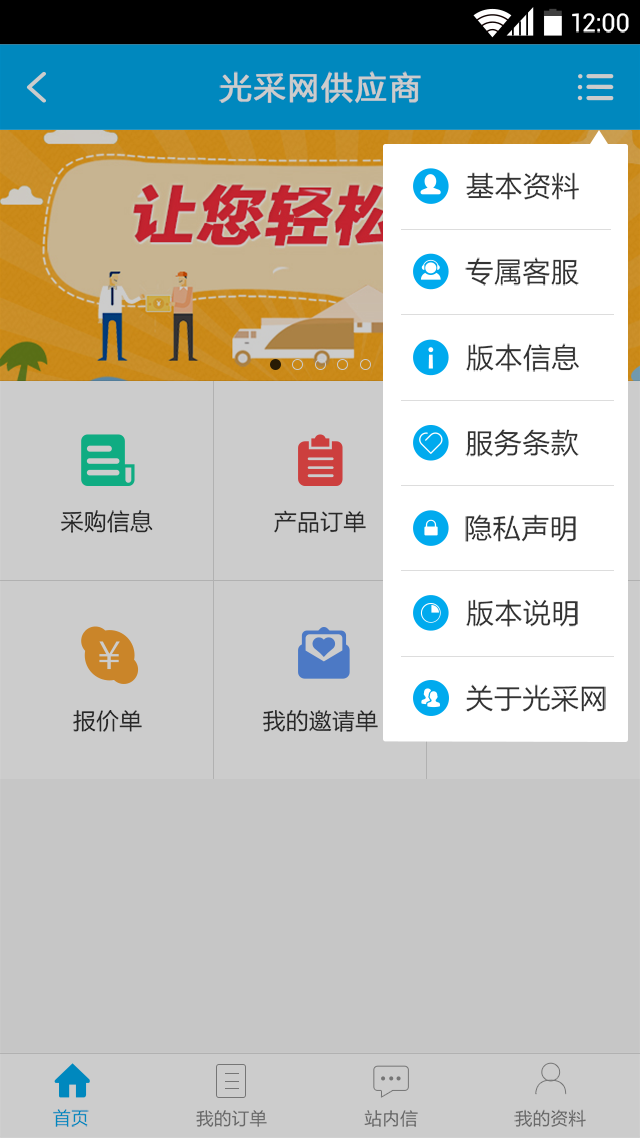
<style>
.page{position:relative;width:640px;height:1138px;background:#cccccc}
.page>*{position:absolute;margin:0}
.t1{font:24.9px "Roboto-Regular";color:#ffffff}
.t2{font:32px "FZLTHJW--GB1-0";letter-spacing:0.03em;color:#cccccc;font-weight:bold}
.t3{font:28.4px "FZLTHJW--GB1-0";color:#333333}
.t4{font:23.1px "FZLTHJW--GB1-0";color:#333333}
.t5{font:17.8px "FZLTHJW--GB1-0";color:#0088be}
.t6{font:17.8px "FZLTHJW--GB1-0";color:#6a6a6a}
</style>
<div class="page">
<p class="t1" style="left:572px;top:13px;width:57px;height:20px">12:00</p>
<p class="t2" style="left:219px;top:71px;width:202px;height:32px">光采网供应商</p>
<p class="t3" style="left:466px;top:172px;width:113px;height:28px">基本资料</p>
<p class="t3" style="left:465px;top:257px;width:114px;height:29px">专属客服</p>
<p class="t3" style="left:466px;top:343px;width:113px;height:29px">版本信息</p>
<p class="t3" style="left:465px;top:429px;width:114px;height:28px">服务条款</p>
<p class="t4" style="left:61px;top:510px;width:92px;height:23px">采购信息</p>
<p class="t4" style="left:274px;top:510px;width:92px;height:23px">产品订单</p>
<p class="t3" style="left:465px;top:514px;width:111px;height:28px">隐私声明</p>
<p class="t3" style="left:466px;top:599px;width:112px;height:28px">版本说明</p>
<p class="t3" style="left:465px;top:684px;width:141px;height:28px">关于光采网</p>
<p class="t4" style="left:73px;top:710px;width:69px;height:22px">报价单</p>
<p class="t4" style="left:263px;top:710px;width:115px;height:22px">我的邀请单</p>
<p class="t5" style="left:53px;top:1109px;width:36px;height:18px">首页</p>
<p class="t6" style="left:196px;top:1110px;width:71px;height:17px">我的订单</p>
<p class="t6" style="left:364px;top:1110px;width:54px;height:17px">站内信</p>
<p class="t6" style="left:514px;top:1109px;width:72px;height:18px">我的资料</p>
</div>
